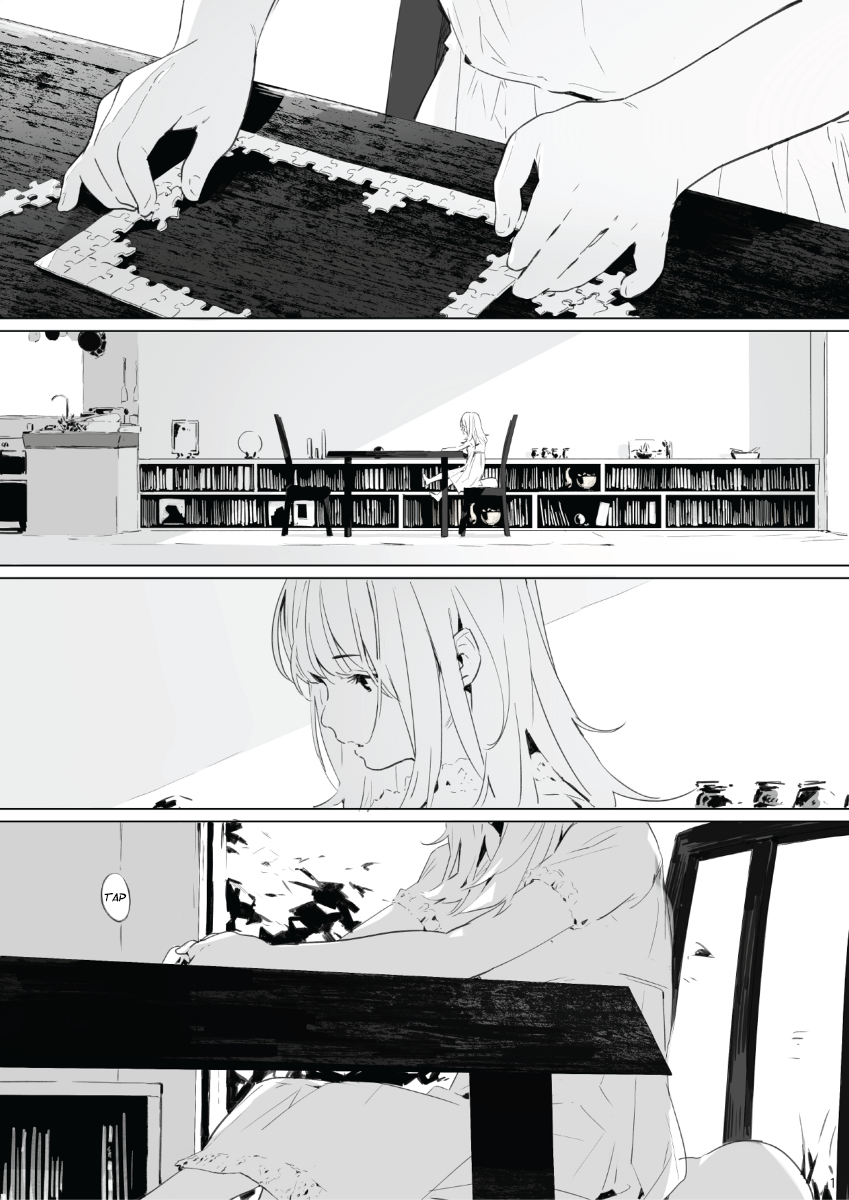
<style>
.page{position:relative;width:849px;height:1200px;background:#ffffff}
.page>*{position:absolute;margin:0}
.t1{font:12px "SFToontime";color:#000000;font-style:italic}
</style>
<div class="page">
<p class="t1" style="left:104px;top:893px;width:23px;height:9px">tap</p>
</div>
